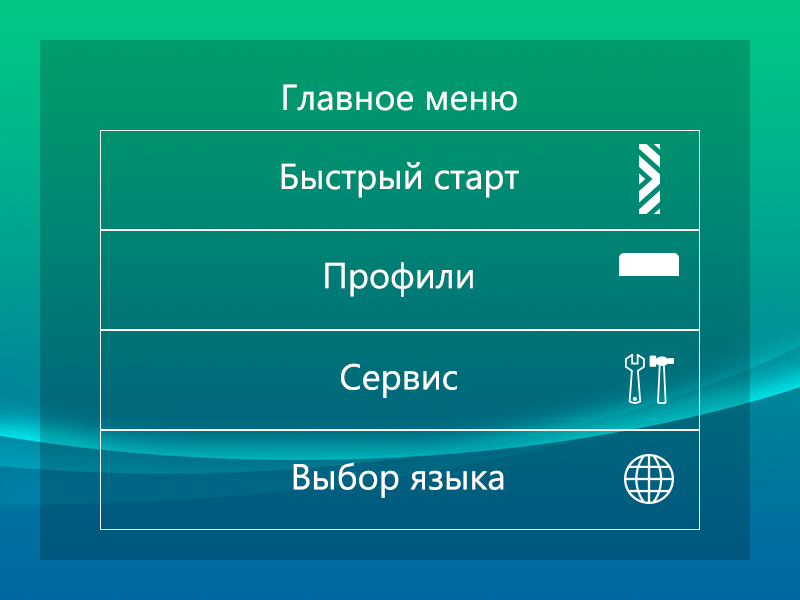
<style>
.page{position:relative;width:800px;height:600px}
.page>*{position:absolute;margin:0}
.t1{font:36px "SegoeUI";color:#ffffff}
</style>
<div class="page">
<p class="t1" style="left:283px;top:84px;width:234px;height:27px">Главное меню</p>
<p class="t1" style="left:281px;top:162px;width:238px;height:36px">Быстрый старт</p>
<p class="t1" style="left:325px;top:262px;width:148px;height:35px">Профили</p>
<p class="t1" style="left:341px;top:363px;width:116px;height:35px">Сервис</p>
<p class="t1" style="left:293px;top:462px;width:211px;height:36px">Выбор языка</p>
</div>
